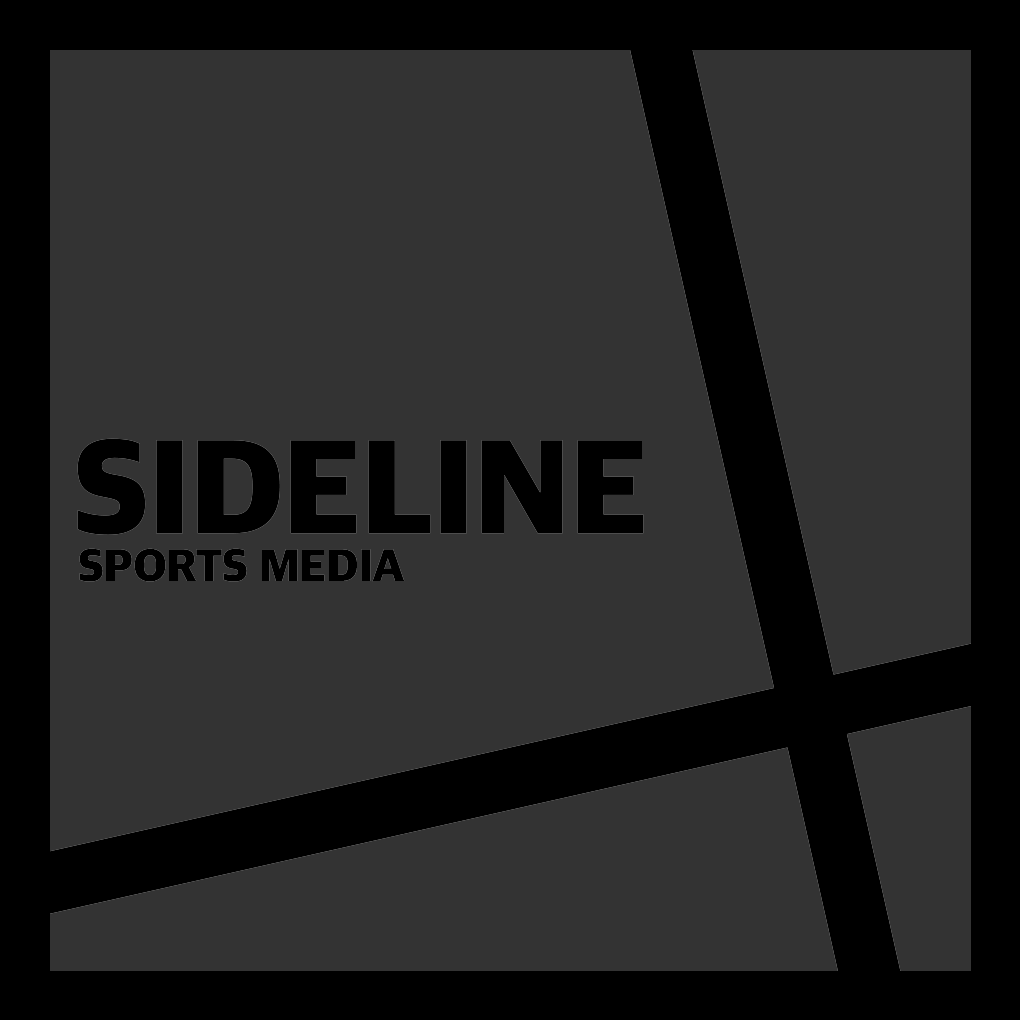
<style>
.page{position:relative;width:1020px;height:1020px;background:#333333}
.page>*{position:absolute;margin:0}
.t1{font:138.2px "AppleSDGothicNeo-Heavy";letter-spacing:-0.02em;color:#000000}
.t2{font:47.2px "AppleSDGothicNeo-Heavy";letter-spacing:-0.02em;color:#000000}
</style>
<div class="page">
<p class="t1" style="left:77px;top:438px;width:567px;height:97px">SIDELINE</p>
<p class="t2" style="left:79px;top:548px;width:326px;height:34px">SPORTS MEDIA</p>
</div>
